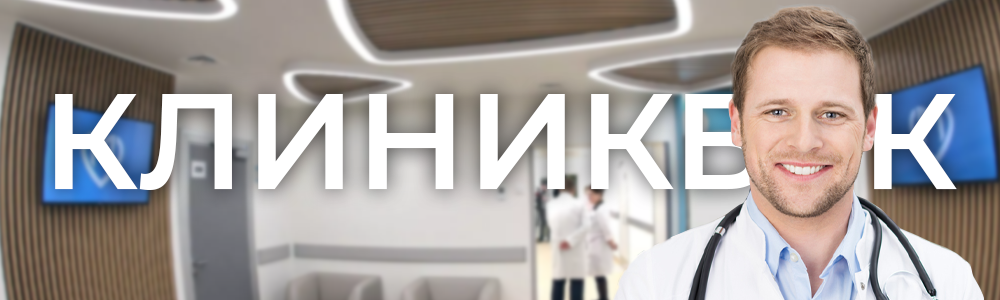
<style>
.page{position:relative;width:1000px;height:300px}
.page>*{position:absolute;margin:0}
.t1{font:134.9px "Montserrat-SemiBold";color:#ffffff}
</style>
<div class="page">
<p class="t1" style="left:55px;top:94px;width:902px;height:96px">КЛИНИКБУК</p>
</div>
